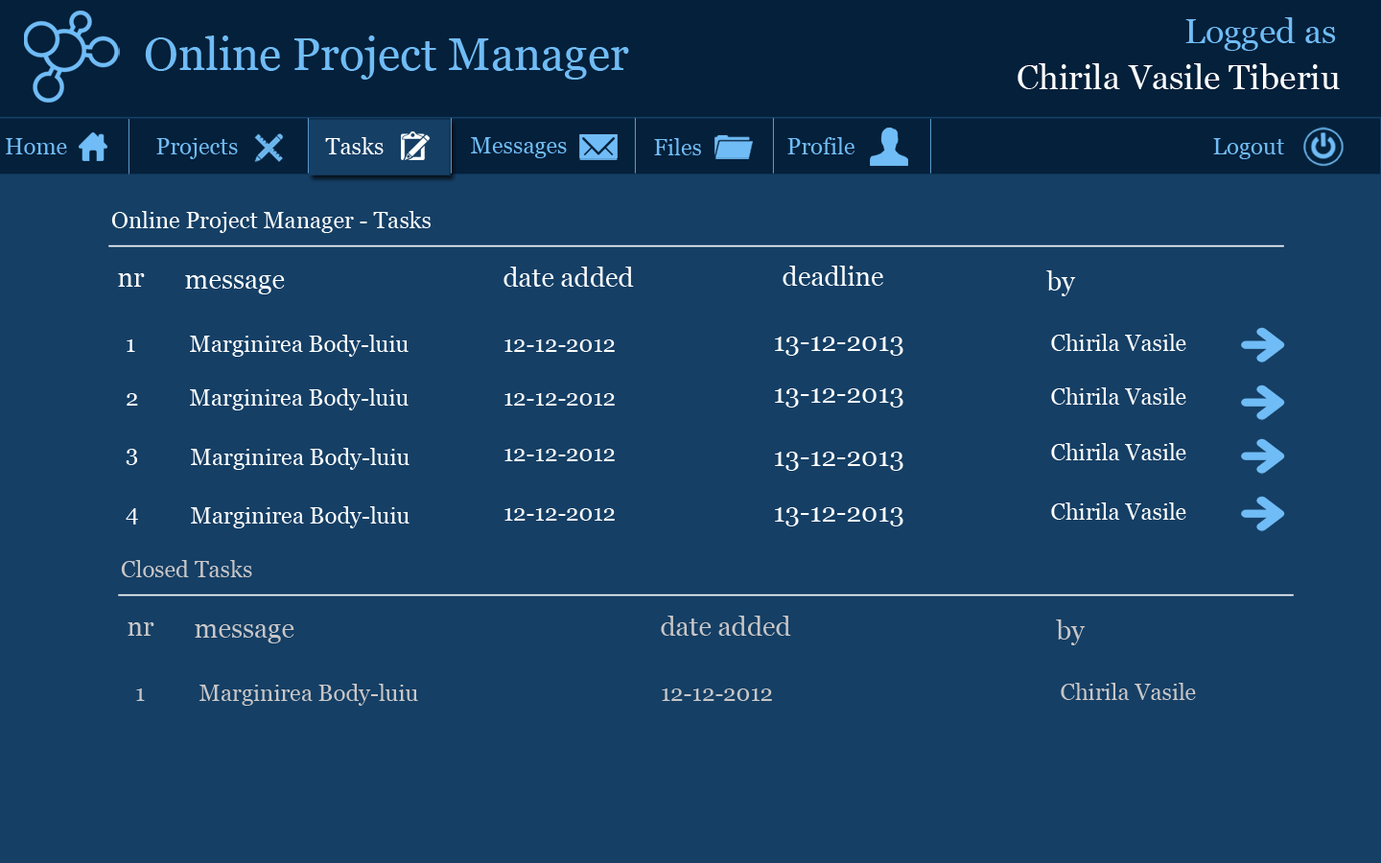
<style>
.page{position:relative;width:1381px;height:863px;background:#153f65}
.page>*{position:absolute;margin:0}
.t1{font:34.5px "Georgia";color:#70bcf6}
.t2{font:46px "Georgia";color:#70bcf6}
.t3{font:34.5px "Georgia";color:#fefefe}
.t4{font:23px "Georgia";color:#ffffff}
.t5{font:23px "Georgia";color:#70bcf6}
.t6{font:26.9px "Georgia";color:#ffffff}
.t7{font:23px "Georgia";color:#c9c6c6}
.t8{font:26.9px "Georgia";color:#c9c6c6}
</style>
<div class="page">
<p class="t1" style="left:1186px;top:17px;width:150px;height:34px">Logged as</p>
<p class="t2" style="left:145px;top:35px;width:484px;height:45px">Online Project Manager</p>
<p class="t3" style="left:1018px;top:63px;width:322px;height:26px">Chirila Vasile Tiberiu</p>
<p class="t4" style="left:325px;top:137px;width:59px;height:17px">Tasks</p>
<p class="t5" style="left:471px;top:137px;width:96px;height:21px">Messages</p>
<p class="t5" style="left:788px;top:137px;width:67px;height:17px">Profile</p>
<p class="t5" style="left:6px;top:138px;width:61px;height:16px">Home</p>
<p class="t5" style="left:156px;top:138px;width:82px;height:21px">Projects</p>
<p class="t5" style="left:654px;top:138px;width:47px;height:17px">Files</p>
<p class="t5" style="left:1213px;top:138px;width:71px;height:21px">Logout</p>
<p class="t4" style="left:111px;top:211px;width:320px;height:22px">Online Project Manager - Tasks</p>
<p class="t6" style="left:504px;top:267px;width:130px;height:20px">date added</p>
<p class="t6" style="left:783px;top:266px;width:100px;height:20px">deadline</p>
<p class="t6" style="left:118px;top:273px;width:27px;height:14px">nr</p>
<p class="t6" style="left:185px;top:275px;width:100px;height:19px">message</p>
<p class="t6" style="left:1046px;top:270px;width:30px;height:26px">by</p>
<p class="t4" style="left:127px;top:340px;width:8px;height:12px">1</p>
<p class="t4" style="left:190px;top:335px;width:219px;height:22px">Marginirea Body-luiu</p>
<p class="t4" style="left:505px;top:340px;width:110px;height:12px">12-12-2012</p>
<p class="t6" style="left:775px;top:337px;width:129px;height:19px">13-12-2013</p>
<p class="t4" style="left:1051px;top:334px;width:136px;height:17px">Chirila Vasile</p>
<p class="t4" style="left:190px;top:388px;width:219px;height:23px">Marginirea Body-luiu</p>
<p class="t6" style="left:775px;top:388px;width:129px;height:20px">13-12-2013</p>
<p class="t4" style="left:1051px;top:388px;width:136px;height:17px">Chirila Vasile</p>
<p class="t4" style="left:127px;top:393px;width:11px;height:13px">2</p>
<p class="t4" style="left:505px;top:393px;width:110px;height:13px">12-12-2012</p>
<p class="t4" style="left:126px;top:449px;width:11px;height:16px">3</p>
<p class="t4" style="left:191px;top:448px;width:219px;height:22px">Marginirea Body-luiu</p>
<p class="t4" style="left:505px;top:449px;width:110px;height:12px">12-12-2012</p>
<p class="t4" style="left:1051px;top:443px;width:136px;height:17px">Chirila Vasile</p>
<p class="t6" style="left:775px;top:452px;width:129px;height:19px">13-12-2013</p>
<p class="t4" style="left:126px;top:508px;width:12px;height:17px">4</p>
<p class="t4" style="left:191px;top:506px;width:219px;height:23px">Marginirea Body-luiu</p>
<p class="t4" style="left:505px;top:508px;width:110px;height:13px">12-12-2012</p>
<p class="t6" style="left:775px;top:507px;width:129px;height:20px">13-12-2013</p>
<p class="t4" style="left:1051px;top:503px;width:136px;height:17px">Chirila Vasile</p>
<p class="t7" style="left:121px;top:560px;width:131px;height:17px">Closed Tasks</p>
<p class="t8" style="left:661px;top:616px;width:130px;height:20px">date added</p>
<p class="t8" style="left:128px;top:623px;width:26px;height:13px">nr</p>
<p class="t8" style="left:195px;top:624px;width:99px;height:20px">message</p>
<p class="t8" style="left:1056px;top:620px;width:30px;height:26px">by</p>
<p class="t7" style="left:136px;top:689px;width:9px;height:12px">1</p>
<p class="t7" style="left:200px;top:684px;width:218px;height:22px">Marginirea Body-luiu</p>
<p class="t7" style="left:662px;top:689px;width:110px;height:12px">12-12-2012</p>
<p class="t7" style="left:1061px;top:683px;width:135px;height:17px">Chirila Vasile</p>
</div>
